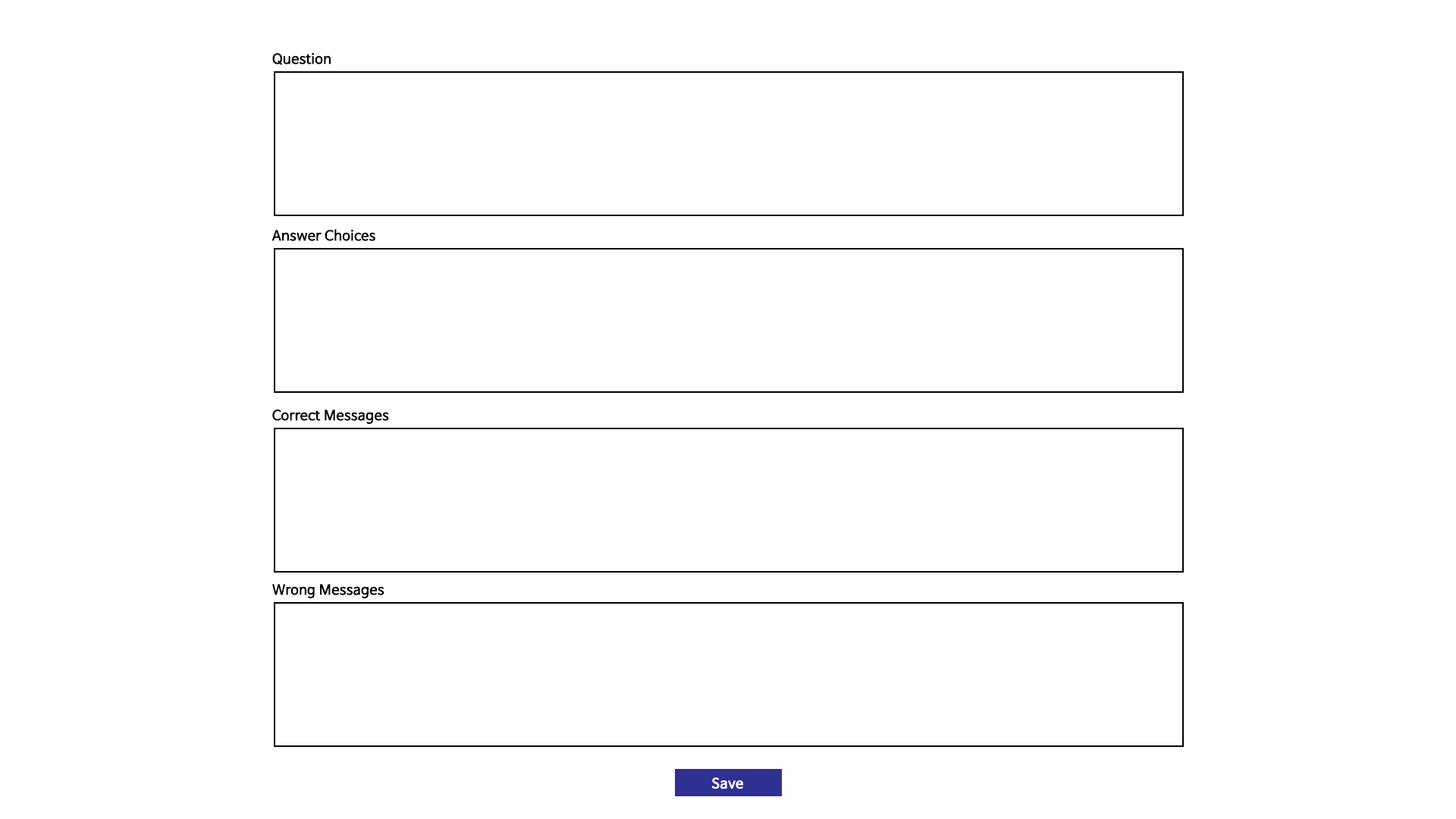
<style>
.page{position:relative;width:1456px;height:819px;background:#ffffff}
.page>*{position:absolute;margin:0}
.t1{font:13.6px "NanumBarunGothic";color:#000000;font-weight:bold}
.t2{font:13.6px "NanumBarunGothic";color:#ffffff;font-weight:bold}
</style>
<div class="page">
<p class="t1" style="left:272px;top:52px;width:59px;height:13px">Question</p>
<p class="t1" style="left:271px;top:229px;width:104px;height:12px">Answer Choices</p>
<p class="t1" style="left:272px;top:409px;width:117px;height:15px">Correct Messages</p>
<p class="t1" style="left:272px;top:584px;width:112px;height:14px">Wrong Messages</p>
<p class="t2" style="left:712px;top:777px;width:31px;height:12px">Save</p>
</div>
